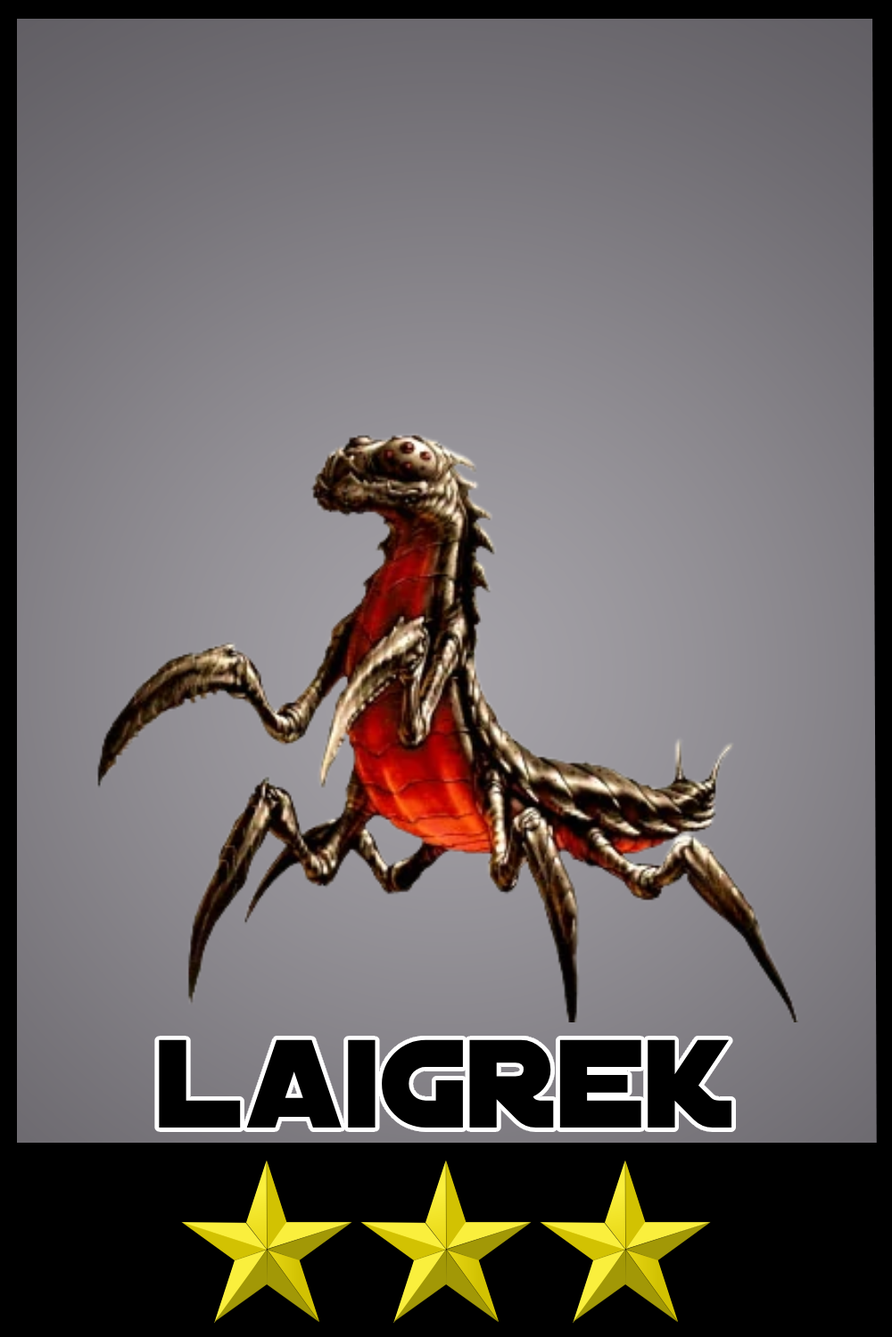
<style>
.page{position:relative;width:892px;height:1337px}
.page>*{position:absolute;margin:0}
.t1{font:134.9px "DistantGalaxy";color:#000000}
</style>
<div class="page">
<p class="t1" style="left:159px;top:1040px;width:573px;height:88px">laigrek</p>
</div>
